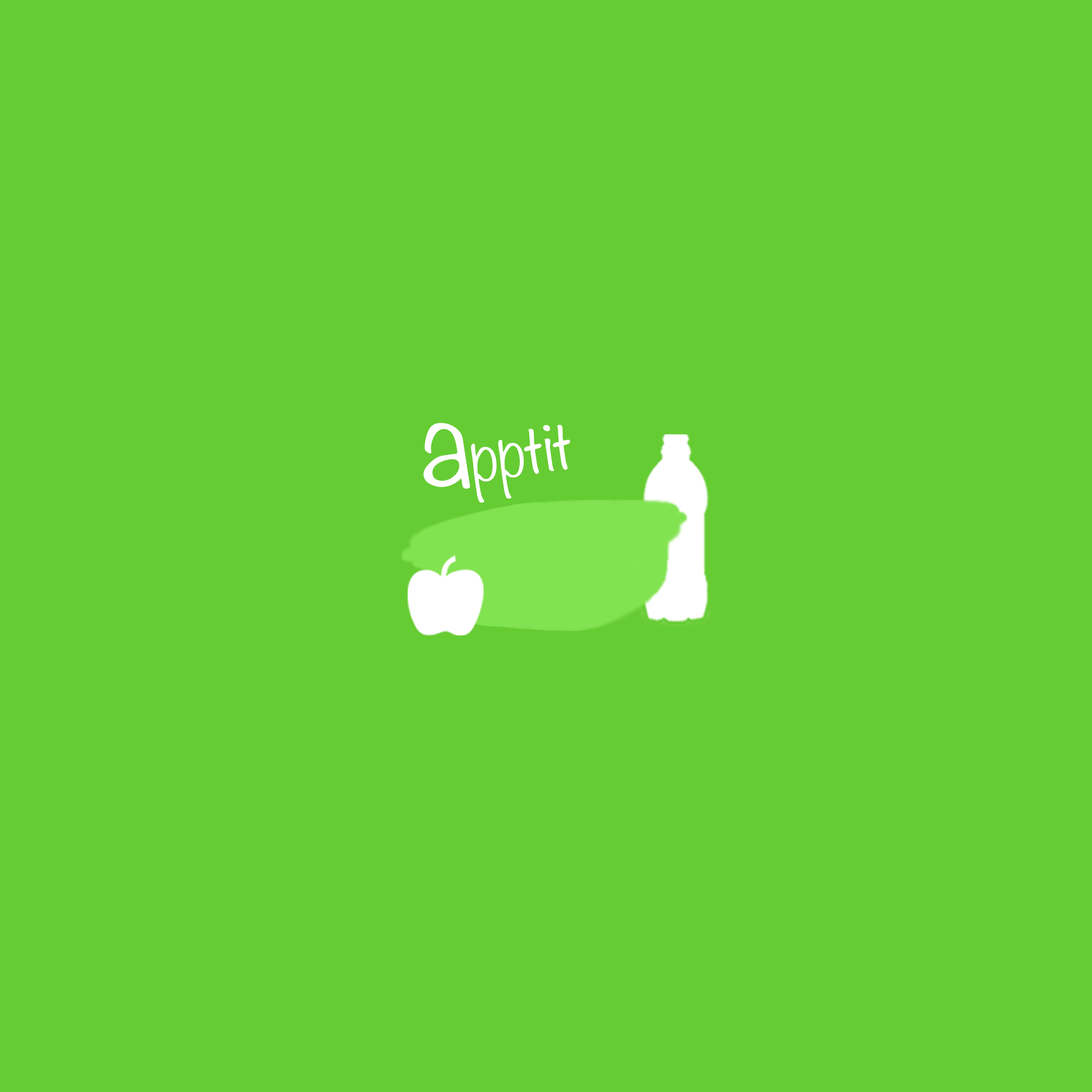
<style>
.page{position:relative;width:1092px;height:1092px;background:#66cc33}
.page>*{position:absolute;margin:0}
.t1{font:117.6px "Noteworthy-Light";color:#ffffff}
.t2{font:62.7px "Noteworthy-Light";color:#ffffff}
</style>
<div class="page">
<p class="t1" style="left:423px;top:423px;width:47px;height:66px;rotate:-8deg">a</p>
<p class="t2" style="left:471px;top:425px;width:99px;height:78px;rotate:-8deg">pptit</p>
</div>
